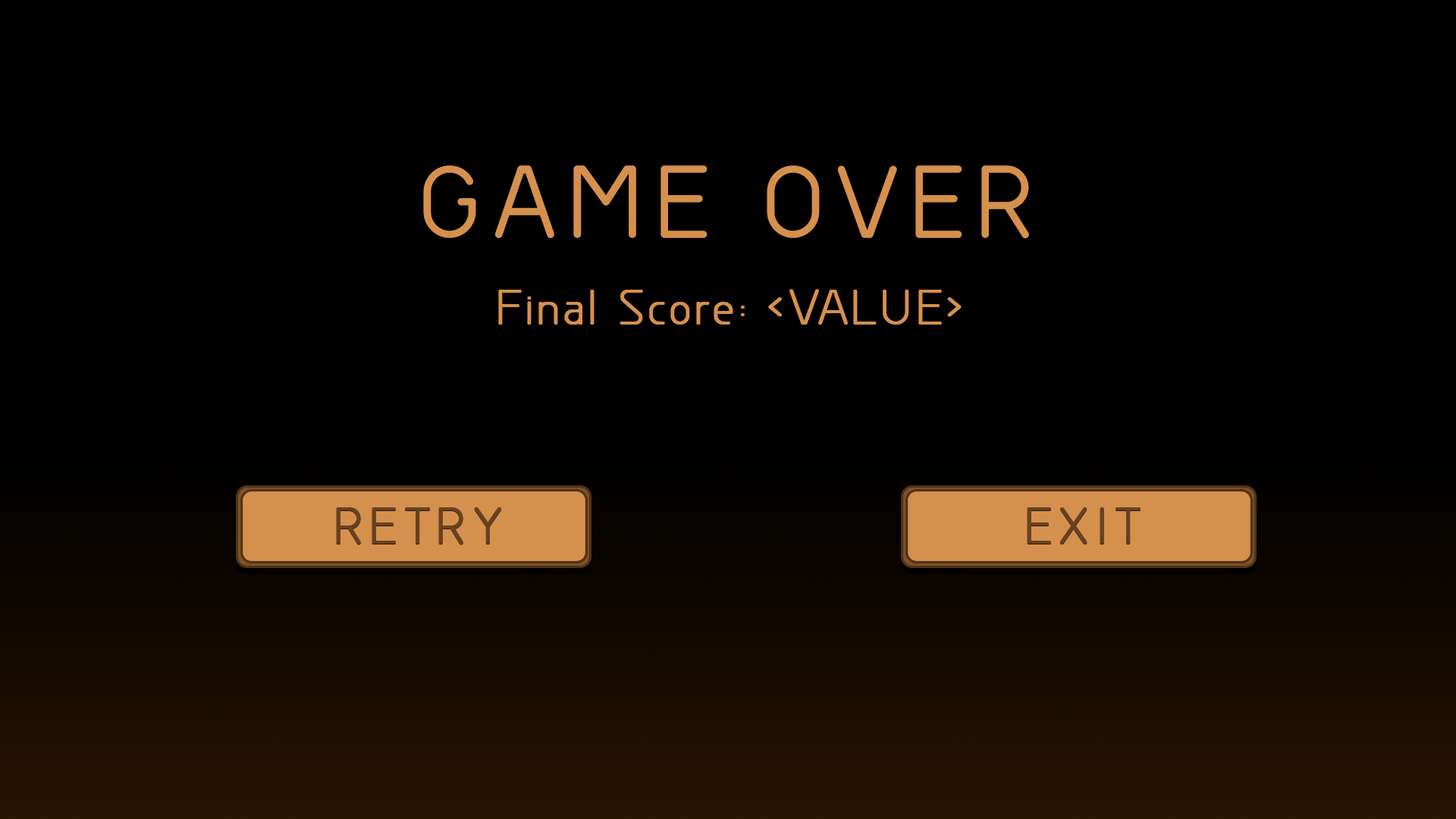
<style>
.page{position:relative;width:1456px;height:819px;background:#000000}
.page>*{position:absolute;margin:0}
.t1{font:91.8px "GreyscaleBasic";letter-spacing:0.15em;color:#d6904d;font-weight:bold}
.t2{font:45.5px "GreyscaleBasic";letter-spacing:0.075em;color:#d6904d;font-weight:bold}
.t3{font:47px "GreyscaleBasic";letter-spacing:0.15em;color:#674220;font-weight:bold}
</style>
<div class="page">
<p class="t1" style="left:423px;top:165px;width:606px;height:74px">GAME OVER</p>
<p class="t2" style="left:498px;top:289px;width:464px;height:36px">Final Score: &lt;VALUE&gt;</p>
<p class="t3" style="left:336px;top:507px;width:165px;height:37px">RETRY</p>
<p class="t3" style="left:1027px;top:507px;width:114px;height:37px">EXIT</p>
</div>
